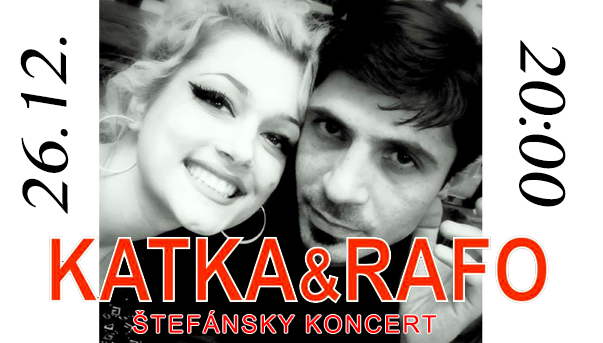
<style>
.page{position:relative;width:603px;height:343px;background:#ffffff}
.page>*{position:absolute;margin:0}
.t1{font:72px "KannadaMN";letter-spacing:0.01em;color:#000000;font-style:italic}
.t2{font:24px "ArialMT";letter-spacing:0.1em;color:#ff0000}
</style>
<div class="page">
<p class="t1" style="left:20px;top:37px;width:49px;height:177px;rotate:-91deg">26.12.</p>
<p class="t1" style="left:519px;top:40px;width:47px;height:167px;rotate:90deg">20:00</p>
<p class="t2" style="left:133px;top:311px;width:304px;height:22px">ŠTEFÁNSKY KONCERT</p>
</div>
